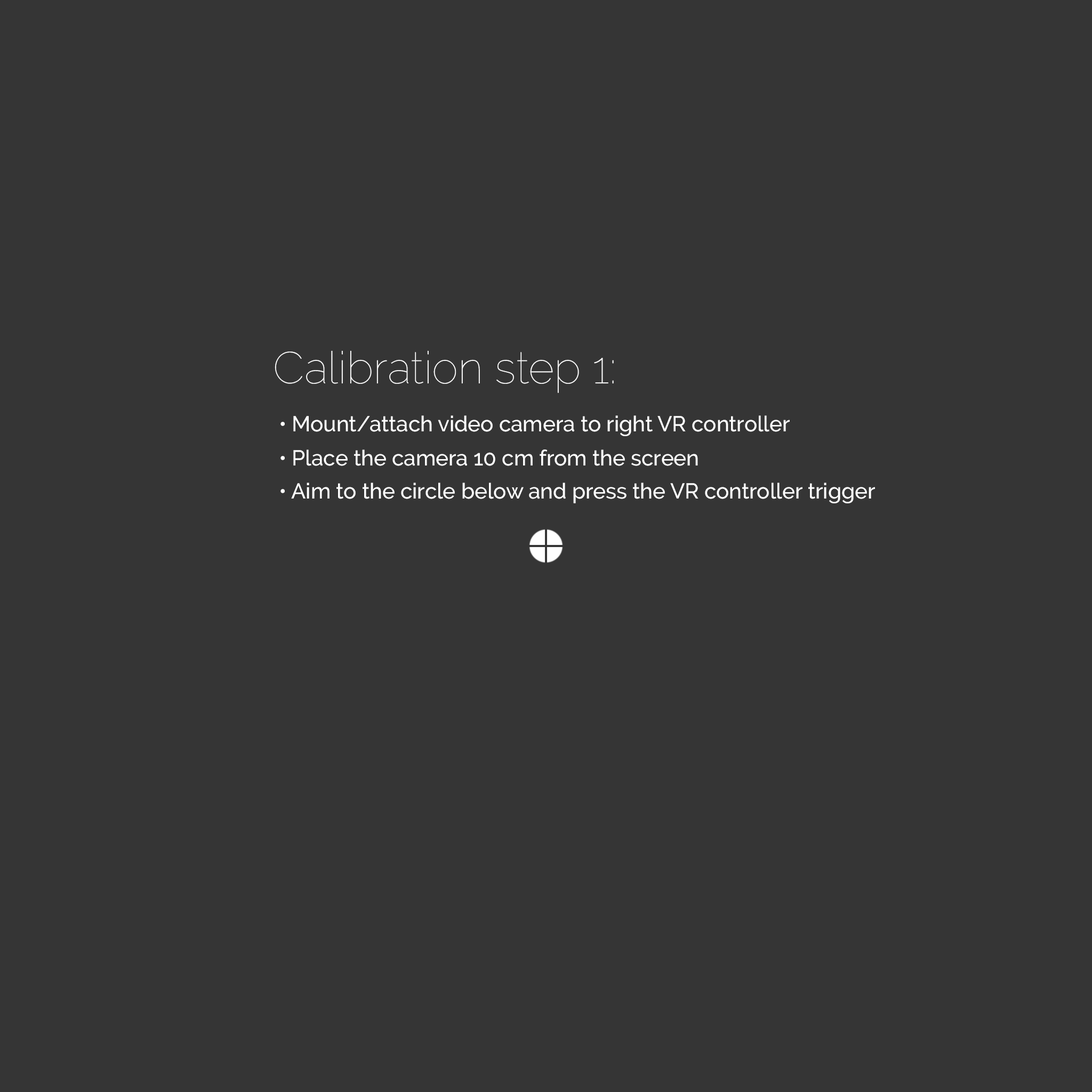
<style>
.page{position:relative;width:1092px;height:1092px;background:#353535}
.page>*{position:absolute;margin:0}
.t1{font:44.5px "Raleway-Thin";color:#ffffff}
.t2{font:21.5px "Raleway-Medium";color:#ffffff}
</style>
<div class="page">
<p class="t1" style="left:275px;top:350px;width:339px;height:43px">Calibration step 1:</p>
<p class="t2" style="left:280px;top:415px;width:510px;height:21px">• Mount/attach video camera to right VR controller</p>
<p class="t2" style="left:280px;top:449px;width:418px;height:17px">• Place the camera 10 cm from the screen</p>
<p class="t2" style="left:280px;top:483px;width:595px;height:20px">• Aim to the circle below and press the VR controller trigger</p>
</div>
